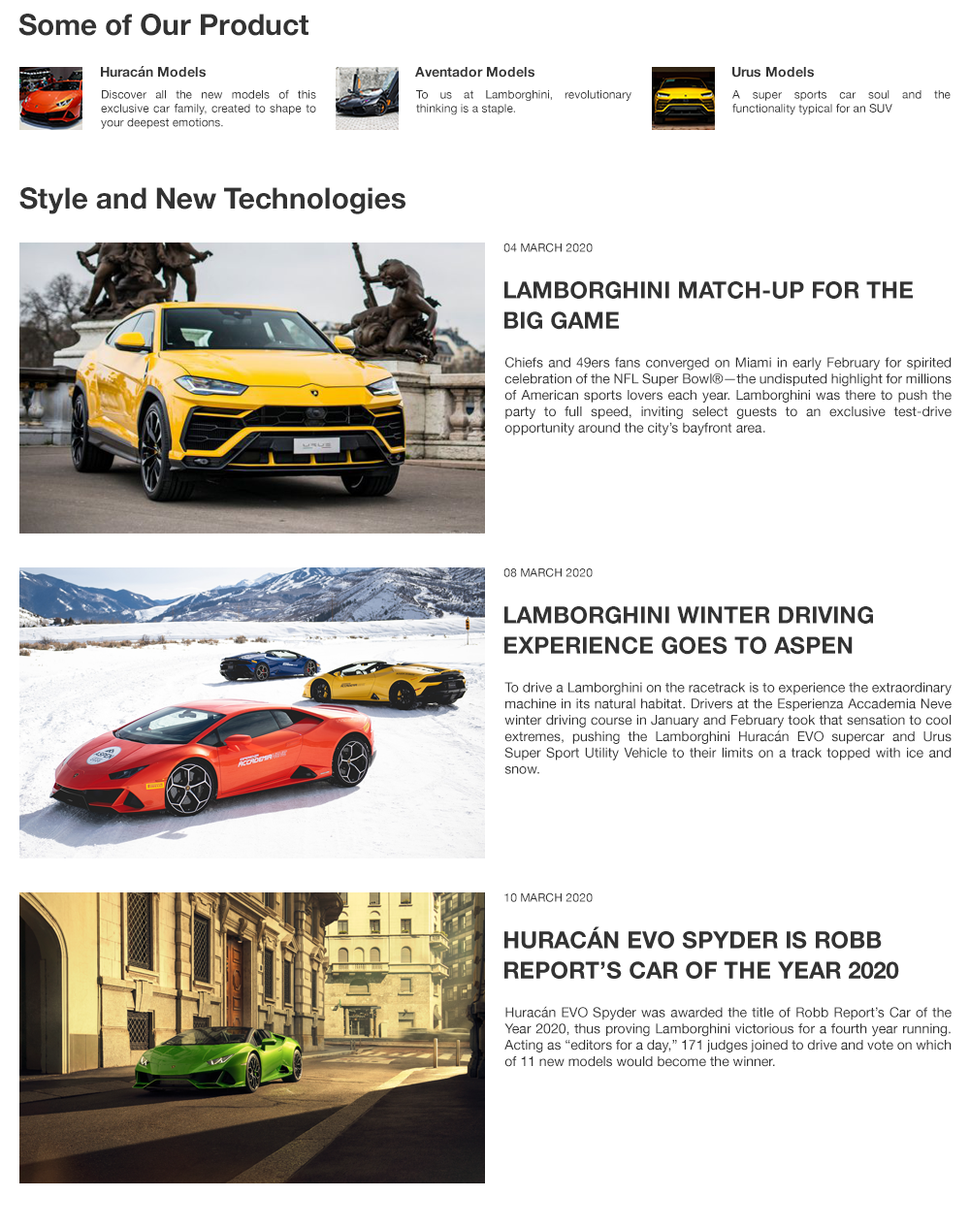
<style>
.page{position:relative;width:970px;height:1229px;background:#ffffff}
.page>*{position:absolute;margin:0}
.t1{font:29.1px "HelveticaNeue-Bold";color:#333333}
.t2{font:13.6px "HelveticaNeue-Bold";color:#333333}
.t3{font:11.6px "HelveticaNeue";color:#333333}
.t4{font:23.3px/30.3px "HelveticaNeue-Bold";color:#333333}
.t5{font:13.6px "HelveticaNeue";color:#333333}
</style>
<div class="page">
<p class="t1" style="left:18px;top:14px;width:291px;height:22px">Some of Our Product</p>
<p class="t2" style="left:101px;top:66px;width:105px;height:12px">Huracán Models</p>
<p class="t2" style="left:415px;top:67px;width:120px;height:11px">Aventador Models</p>
<p class="t2" style="left:732px;top:67px;width:82px;height:11px">Urus Models</p>
<p class="t3" style="left:101px;top:89px;width:215px;height:40px;text-align:justify">Discover all the new models of this exclusive car family, created to shape to your deepest emotions.</p>
<p class="t3" style="left:416px;top:90px;width:216px;height:25px;text-align:justify">To us at Lamborghini, revolutionary thinking is a staple.</p>
<p class="t3" style="left:732px;top:90px;width:219px;height:25px;text-align:justify">A super sports car soul and the functionality typical for an SUV</p>
<p class="t1" style="left:19px;top:187px;width:387px;height:27px">Style and New Technologies</p>
<p class="t3" style="left:503px;top:243px;width:90px;height:9px">04 MARCH 2020</p>
<p class="t4" style="left:504px;top:281px;width:409px;height:49px">LAMBORGHINI MATCH-UP FOR THE BIG GAME</p>
<p class="t5" style="left:504px;top:357px;width:448px;height:79px;text-align:justify">Chiefs and 49ers fans converged on Miami in early February for spirited celebration of the NFL Super Bowl®—the undisputed highlight for millions of American sports lovers each year. Lamborghini was there to push the party to full speed, inviting select guests to an exclusive test-drive opportunity around the city’s bayfront area.</p>
<p class="t3" style="left:503px;top:568px;width:90px;height:9px">08 MARCH 2020</p>
<p class="t4" style="left:504px;top:606px;width:369px;height:49px">LAMBORGHINI WINTER DRIVING EXPERIENCE GOES TO ASPEN</p>
<p class="t5" style="left:504px;top:682px;width:448px;height:92px;text-align:justify">To drive a Lamborghini on the racetrack is to experience the extraordinary machine in its natural habitat. Drivers at the Esperienza Accademia Neve winter driving course in January and February took that sensation to cool extremes, pushing the Lamborghini Huracán EVO supercar and Urus Super Sport Utility Vehicle to their limits on a track topped with ice and snow.</p>
<p class="t3" style="left:504px;top:893px;width:89px;height:9px">10 MARCH 2020</p>
<p class="t4" style="left:504px;top:926px;width:395px;height:53px">HURACÁN EVO SPYDER IS ROBB REPORT’S CAR OF THE YEAR 2020</p>
<p class="t5" style="left:504px;top:1006px;width:448px;height:61px;text-align:justify">Huracán EVO Spyder was awarded the title of Robb Report’s Car of the Year 2020, thus proving Lamborghini victorious for a fourth year running. Acting as “editors for a day,” 171 judges joined to drive and vote on which of 11 new models would become the winner.</p>
</div>
